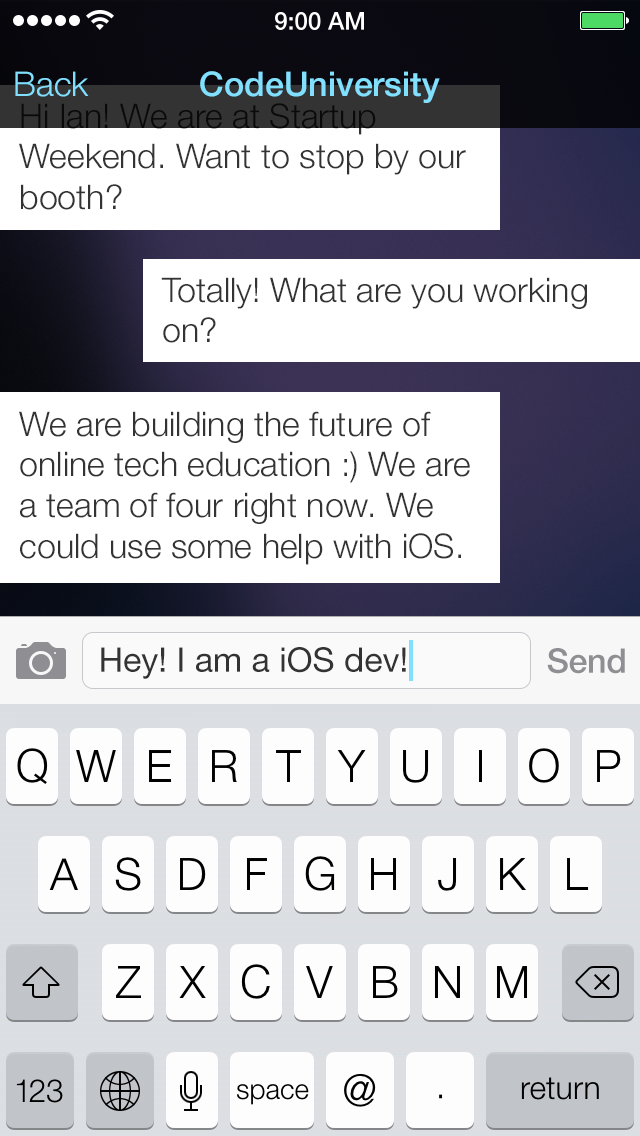
<style>
.page{position:relative;width:640px;height:1136px;background:#ffffff}
.page>*{position:absolute;margin:0}
.t1{font:34px "HelveticaNeue-Light";color:#82e0ff}
.t2{font:34px "HelveticaNeue-Medium";color:#82e0ff}
.t3{font:34px "HelveticaNeue-Light";color:#333333}
.t4{font:34px "HelveticaNeue";color:#333333}
.t5{font:34px "HelveticaNeue-Medium";letter-spacing:-0.01em;color:#8e8e93}
</style>
<div class="page">
<p class="t1" style="left:15px;top:71px;width:74px;height:26px">Back</p>
<p class="t2" style="left:200px;top:71px;width:240px;height:32px">CodeUniversity</p>
<p class="t3" style="left:19px;top:103px;width:447px;height:107px">Hi Ian! We are at Startup Weekend. Want to stop by our booth?</p>
<p class="t3" style="left:161px;top:277px;width:426px;height:66px">Totally! What are you working on?</p>
<p class="t3" style="left:19px;top:411px;width:451px;height:154px">We are building the future of online tech education :) We are a team of four right now. We could use some help with iOS.</p>
<p class="t4" style="left:101px;top:647px;width:305px;height:32px">Hey! I am a iOS dev!</p>
<p class="t5" style="left:547px;top:648px;width:78px;height:26px">Send</p>
</div>
